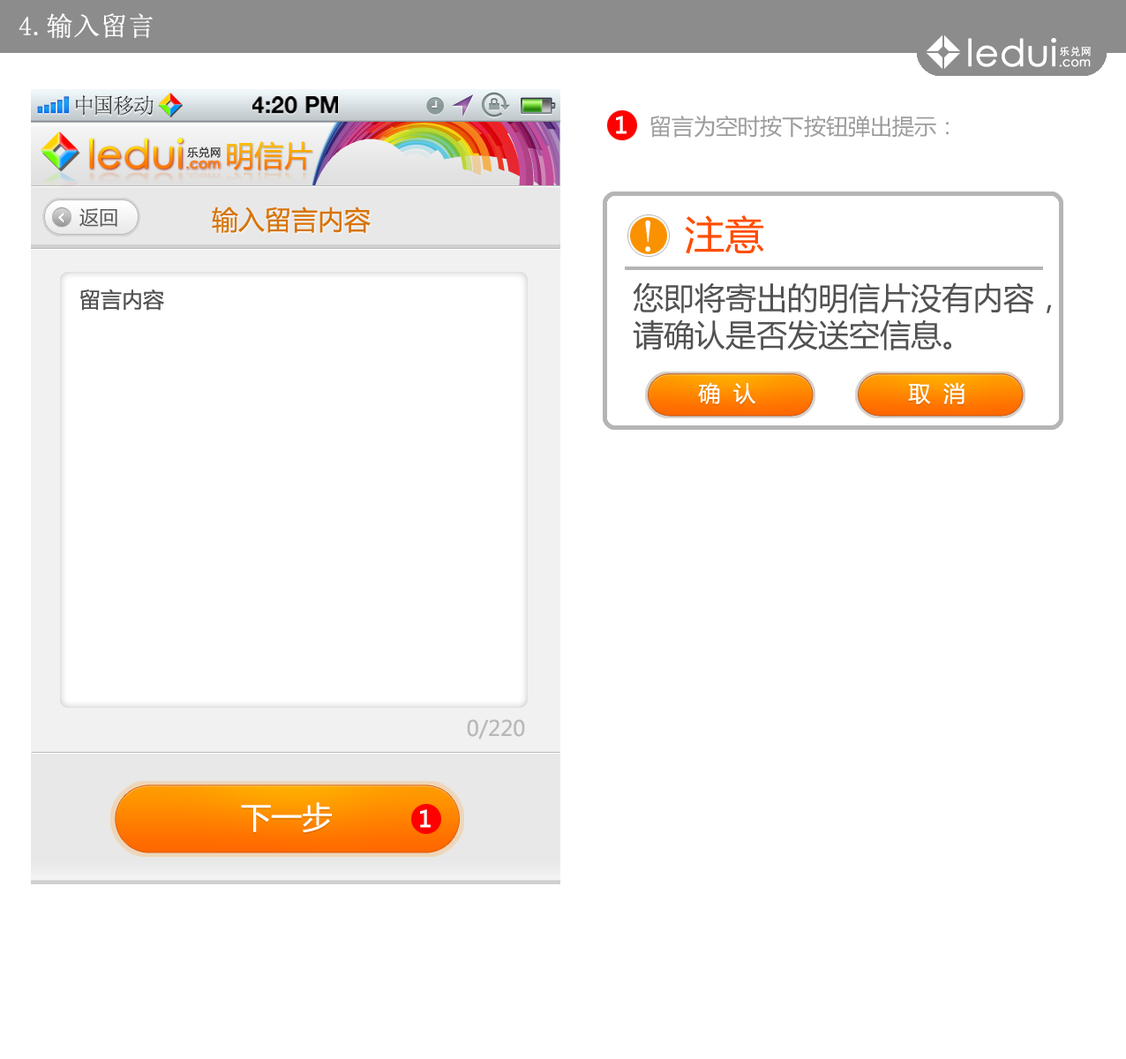
<style>
.page{position:relative;width:1126px;height:1059px;background:#ffffff}
.page>*{position:absolute;margin:0}
.t1{font:26.5px "SimSun";color:#ffffff;font-weight:bold}
.t2{font:21.5px "SimSun";color:#414141}
.t3{font:23.1px "HelveticaNeue-Bold";color:#000000;text-transform:uppercase}
.t4{font:22.1px "MicrosoftYaHei";color:#9c9c9c}
.t5{font:39.5px "CenturyGothic";font-weight:bold}
.t6{font:13.2px "CenturyGothic";font-weight:bold}
.t7{font:10.9px "MicrosoftYaHei";letter-spacing:0.05em;color:#3d3d3d}
.t8{font:29.1px "MicrosoftYaHei"}
.t9{font:23.7px "CenturyGothic";color:#e0d9d4;font-weight:bold;scale:1.67 1}
.t10{font:7.9px "CenturyGothic";color:#e0d9d4;font-weight:bold;scale:1.67 1}
.t11{font:19.4px "MicrosoftYaHei";color:#5b5b5b}
.t12{font:26.5px "MicrosoftYaHei";color:#d7740a}
.t13{font:35.3px "ç»å¸ç»¼èºä½ç®-regular";color:#ffffff}
.t14{font:39.7px "MicrosoftYaHei";color:#ff4e00}
.t15{font:21.2px "MicrosoftYaHei";color:#525252}
.t16{font:30.9px "MicrosoftYaHei";color:#525252}
.t17{font:22.1px "MicrosoftYaHei";color:#ffffff}
.t18{font:21.2px "MicrosoftYaHei";color:#b7b7b7}
.t19{font:30.6px "MicrosoftYaHei";color:#ffffff}
</style>
<div class="page">
<p class="t1" style="left:19px;top:13px;width:134px;height:26px">4.输入留言</p>
<p class="t2" style="left:76px;top:95px;width:78px;height:21px">中国移动</p>
<p class="t3" style="left:252px;top:96px;width:86px;height:18px">4:20 PM</p>
<p class="t4" style="left:650px;top:116px;width:299px;height:22px">留言为空时按下按钮弹出提示：</p>
<p class="t5" style="left:89px;top:138px;width:131px;height:31px">ledui<span class="t6">.com</span></p>
<p class="t7" style="left:187px;top:146px;width:34px;height:12px">乐兑网</p>
<p class="t8" style="left:227px;top:141px;width:85px;height:29px">明信片</p>
<p class="t9" style="left:89px;top:172px;width:131px;height:19px">ledui<span class="t10">.com</span></p>
<p class="t11" style="left:79px;top:208px;width:38px;height:19px">返回</p>
<p class="t12" style="left:212px;top:206px;width:159px;height:27px">输入留言内容</p>
<p class="t13" style="left:645px;top:220px;width:6px;height:32px">！</p>
<p class="t14" style="left:685px;top:215px;width:79px;height:39px">注意</p>
<p class="t15" style="left:80px;top:289px;width:84px;height:22px">留言内容</p>
<p class="t16" style="left:633px;top:282px;width:419px;height:68px">您即将寄出的明信片没有内容，<br>请确认是否发送空信息。</p>
<p class="t17" style="left:698px;top:382px;width:57px;height:23px">确  认</p>
<p class="t17" style="left:908px;top:382px;width:57px;height:22px">取  消</p>
<p class="t18" style="left:467px;top:719px;width:58px;height:21px">0/220</p>
<p class="t19" style="left:241px;top:802px;width:91px;height:31px">下一步</p>
</div>
